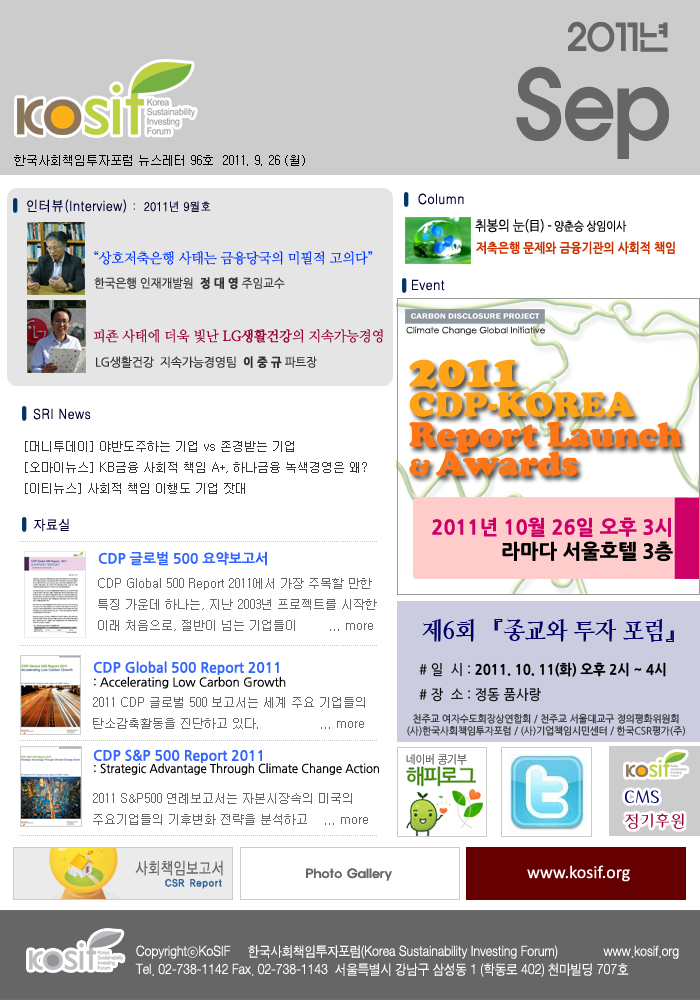
<style>
.page{position:relative;width:700px;height:1000px;background:#ffffff}
.page>*{position:absolute;margin:0}
.t1{font:36.1px/41.9px "ExpoM-HM";color:#666666;scale:0.89 1}
.t2{font:90.2px/41.9px "ExpoM-HM";color:#666666;scale:0.89 1}
.t3{font:12px "Gulim";color:#000000}
.t4{font:14px "H2gtrM";color:#000033;scale:0.9 1}
.t5{font:12px "H2gtrM";color:#000033;scale:0.9 1}
.t6{font:12px "NanumGothic";letter-spacing:-0.025em;color:#000000;scale:0.9 1}
.t7{font:14px "NanumGothic";letter-spacing:-0.025em;color:#000000;scale:0.9 1}
.t8{font:13px "NanumGothicBold";color:#cc3300;scale:0.9 1}
.t9{font:14px "NanumMyeongjo";color:#0033ff;scale:0.95 1}
.t10{font:12px "NanumGothic";color:#333333;scale:0.95 1}
.t11{font:12px "NanumGothicExtraBold";color:#333333;scale:0.95 1}
.t12{font:14px "NanumMyeongjo";color:#990033;scale:0.95 1}
.t13{font:14px "NanumMyeongjoBold";color:#990033;scale:0.95 1}
.t14{font:12px "NanumGothic";letter-spacing:-0.025em;color:#333333}
.t15{font:12px "Gulim";color:#333333}
.t16{font:14px "NanumGothicBold";color:#3366ff}
.t17{font:12px "Gulim";color:#666666}
.t18{font:23.4px "NanumMyeongjoExtraBold";color:#000066;scale:0.95 1}
.t19{font:12px/14px "NanumGothic";color:#000000}
.t20{font:14px/14px "NanumGothicBold";color:#3366ff}
.t21{font:14px "NanumGothicExtraBold";color:#000000;scale:0.95 1}
.t22{font:14px "NanumGothic";color:#000000;scale:0.95 1}
.t23{font:10px/12px "NanumGothic";color:#333333;scale:0.95 1}
.t24{font:12px/14px "NanumGothic";color:#000000;scale:0.95 1}
.t25{font:14px/18px "SandJg";color:#ffffff;scale:0.9 1}
</style>
<div class="page">
<p class="t1" style="left:516px;top:21px;width:153px;height:138px;text-align:right">2011년<br><span class="t2">Sep</span></p>
<p class="t3" style="left:14px;top:155px;width:291px;height:11px">한국사회책임투자포럼 뉴스레터 96호  2011. 9. 26 (월)</p>
<p class="t4" style="left:418px;top:193px;width:46px;height:12px">Column</p>
<p class="t4" style="left:27px;top:199px;width:184px;height:14px">인터뷰(Interview) <span class="t5">:  2011년 9월호</span></p>
<p class="t6" style="left:475px;top:219px;width:152px;height:14px"><span class="t7">취봉의 눈(目) </span>- 양춘승 상임이사</p>
<p class="t8" style="left:476px;top:241px;width:199px;height:14px">저축은행 문제와 금융기관의 사회적 책임</p>
<p class="t9" style="left:94px;top:251px;width:279px;height:14px">“상호저축은행 사태는 금융당국의 미필적 고의다”</p>
<p class="t10" style="left:94px;top:277px;width:191px;height:13px">한국은행 인재개발원  <span class="t11">정 대 영 </span>주임교수</p>
<p class="t4" style="left:412px;top:279px;width:33px;height:12px">Event</p>
<p class="t12" style="left:94px;top:329px;width:289px;height:14px">피죤 사태에 더욱 빛난 <span class="t13">LG생활건강</span>의 지속가능경영</p>
<p class="t14" style="left:96px;top:356px;width:221px;height:13px">LG생활건강  지속가능경영팀  <span class="t11">이 중 규 </span><span class="t10">파트장</span></p>
<p class="t4" style="left:33px;top:408px;width:58px;height:12px">SRI News</p>
<p class="t15" style="left:25px;top:441px;width:342px;height:53px">[머니투데이] 야반도주하는 기업 vs 존경받는 기업 <br>[오마이뉴스] KB금융 사회적 책임 A+, 하나금융 녹색경영은 왜?<br>[이티뉴스] 사회적 책임 이행도 기업 잣대</p>
<p class="t4" style="left:34px;top:518px;width:35px;height:14px">자료실</p>
<p class="t16" style="left:98px;top:551px;width:169px;height:15px">CDP 글로벌 500 요약보고서</p>
<p class="t17" style="left:98px;top:578px;width:279px;height:53px">CDP Global 500 Report 2011에서 가장 주목할 만한 특징 가운데 하나는, 지난 2003년 프로젝트를 시작한 이래 처음으로, 절반이 넘는 기업들이        ... more</p>
<p class="t18" style="left:422px;top:619px;width:252px;height:23px">제6회 『종교와 투자 포럼』</p>
<p class="t19" style="left:93px;top:661px;width:193px;height:28px"><span class="t20">CDP Global 500 Report 2011<br></span>: Accelerating Low Carbon Growth</p>
<p class="t21" style="left:419px;top:662px;width:247px;height:40px;text-align:justify"><span class="t22"># 일  시 : </span>2011. 10. 11(화) 오후 2시 ~ 4시<br><span class="t22"># 장  소 : 정동 품사랑</span></p>
<p class="t17" style="left:93px;top:697px;width:272px;height:32px">2011 CDP 글로벌 500 보고서는 세계 주요 기업들의 탄소감축활동을 진단하고 있다.               ... more</p>
<p class="t23" style="left:407px;top:713px;width:278px;height:23px;text-align:center">천주교 여자수도회장상연합회 / 천주교 서울대교구 정의평화위원회<br>(사)한국사회책임투자포럼 / (사)기업책임시민센터 / 한국CSR평가(주)</p>
<p class="t24" style="left:93px;top:749px;width:286px;height:26px"><span class="t20">CDP S&amp;P 500 Report 2011 <br></span><span class="t19">: </span>Strategic Advantage Through Climate Change Action</p>
<p class="t17" style="left:93px;top:793px;width:275px;height:32px">2011 S&amp;P500 연례보고서는 자본시장속의 미국의 주요기업들의 기후변화 전략을 분석하고    ... more</p>
<p class="t25" style="left:135px;top:945px;width:544px;height:32px">CopyrightⓒKoSIF     한국사회책임투자포럼(Korea Sustainability Investing Forum)             www.kosif.org <br>Tel. 02-738-1142 Fax. 02-738-1143  서울특별시 강남구 삼성동 1 (학동로 402) 천마빌딩 707호</p>
</div>
